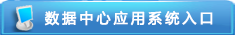
<style>
.page{position:relative;width:235px;height:35px}
.page>*{position:absolute;margin:0}
.t1{font:14px "MicrosoftYaHei";letter-spacing:0.2em;color:#ffffff;font-weight:bold}
</style>
<div class="page">
<p class="t1" style="left:44px;top:10px;width:169px;height:16px">数据中心应用系统入口</p>
</div>
